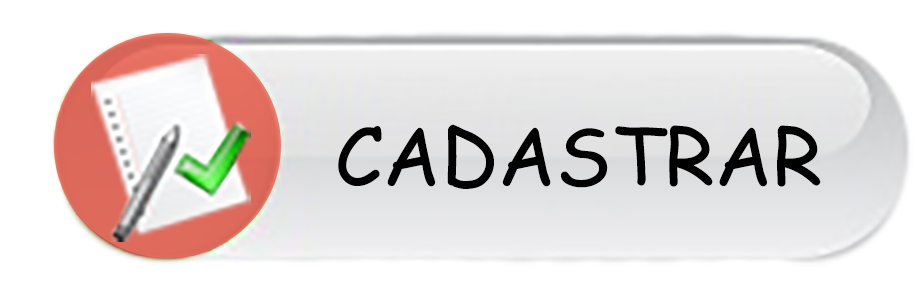
<style>
.page{position:relative;width:921px;height:308px;background:#ffffff}
.page>*{position:absolute;margin:0}
.t1{font:79.2px "ComicSansMS";color:#000000}
</style>
<div class="page">
<p class="t1" style="left:338px;top:124px;width:483px;height:65px">CADASTRAR</p>
</div>
